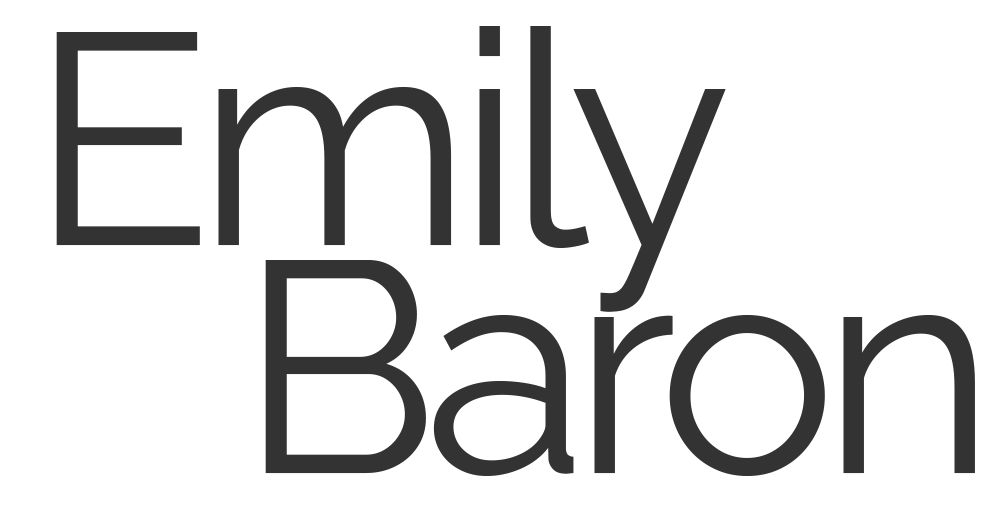
<style>
.page{position:relative;width:1000px;height:520px;background:#ffffff}
.page>*{position:absolute;margin:0}
.t1{font:300px "RalewayRoman-Regular";letter-spacing:-0.05em;color:#333333}
</style>
<div class="page">
<p class="t1" style="left:56px;top:26px;width:670px;height:286px">Emily</p>
<p class="t1" style="left:265px;top:260px;width:710px;height:216px">Baron</p>
</div>
